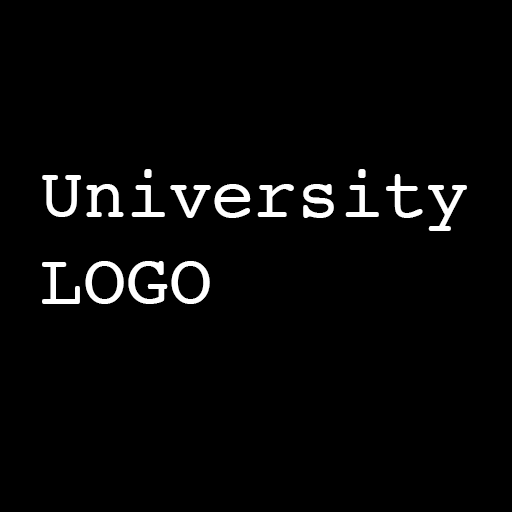
<style>
.page{position:relative;width:512px;height:512px;background:#000000}
.page>*{position:absolute;margin:0}
.t1{font:72px "Courier";letter-spacing:-0.005em;color:#ffffff}
</style>
<div class="page">
<p class="t1" style="left:42px;top:169px;width:425px;height:135px">University<br>LOGO</p>
</div>
